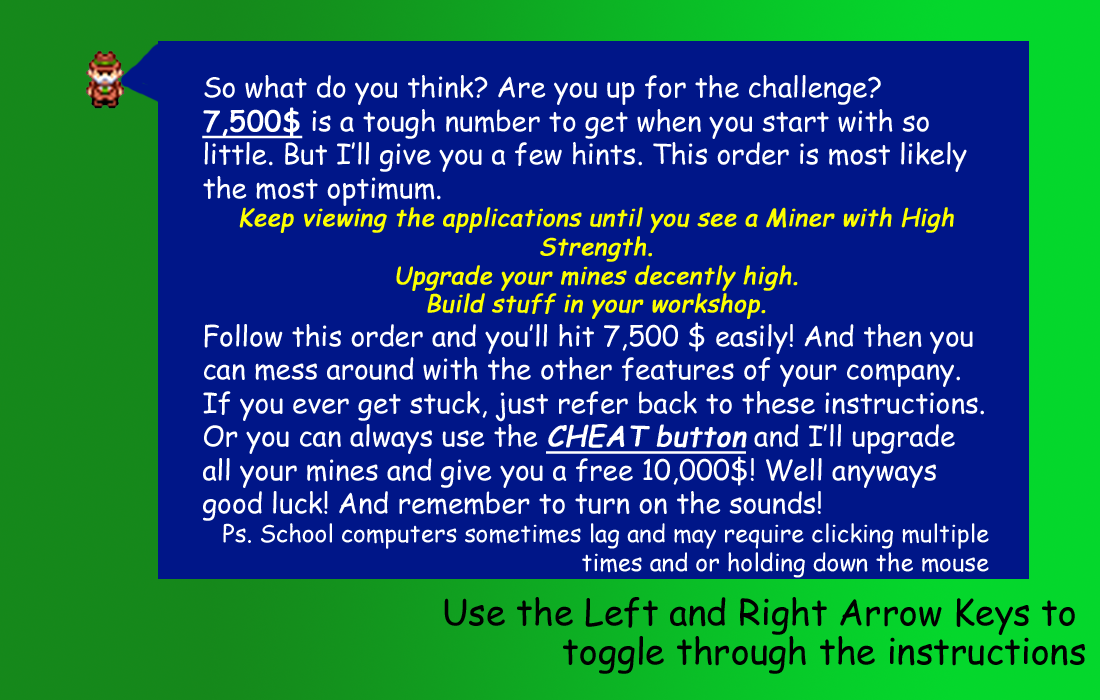
<style>
.page{position:relative;width:1100px;height:700px;background:#001688}
.page>*{position:absolute;margin:0}
.t1{font:27.9px "ComicSansMS";color:#ffffff}
.t2{font:27.9px "ComicSansMS";color:#ffffff;font-weight:bold;text-decoration:underline}
.t3{font:23.9px "ComicSansMS";color:#fcff00;font-weight:bold;font-style:italic}
.t4{font:27.9px "ComicSansMS";color:#ffffff;font-weight:bold;font-style:italic;text-decoration:underline}
.t5{font:23.9px "ComicSansMS";color:#ffffff}
</style>
<div class="page">
<p class="t1" style="left:202px;top:75px;width:787px;height:503px">So what do you think? Are you up for the challenge? <span class="t2">7,500$</span> is a tough number to get when you start with so little. But I’ll give you a few hints. This order is most likely the most optimum. <br><span class="t3">Keep viewing the applications until you see a Miner with High Strength.<br>Upgrade your mines decently high.<br>Build stuff in your workshop.<br></span>Follow this order and you’ll hit 7,500 $ easily! And then you can mess around with the other features of your company. If you ever get stuck, just refer back to these instructions. Or you can always use the <span class="t4">CHEAT button</span> and I’ll upgrade all your mines and give you a free 10,000$! Well anyways good luck! And remember to turn on the sounds!<br><span class="t5">Ps. School computers sometimes lag and may require clicking multiple times and or holding down the mouse</span></p>
</div>
